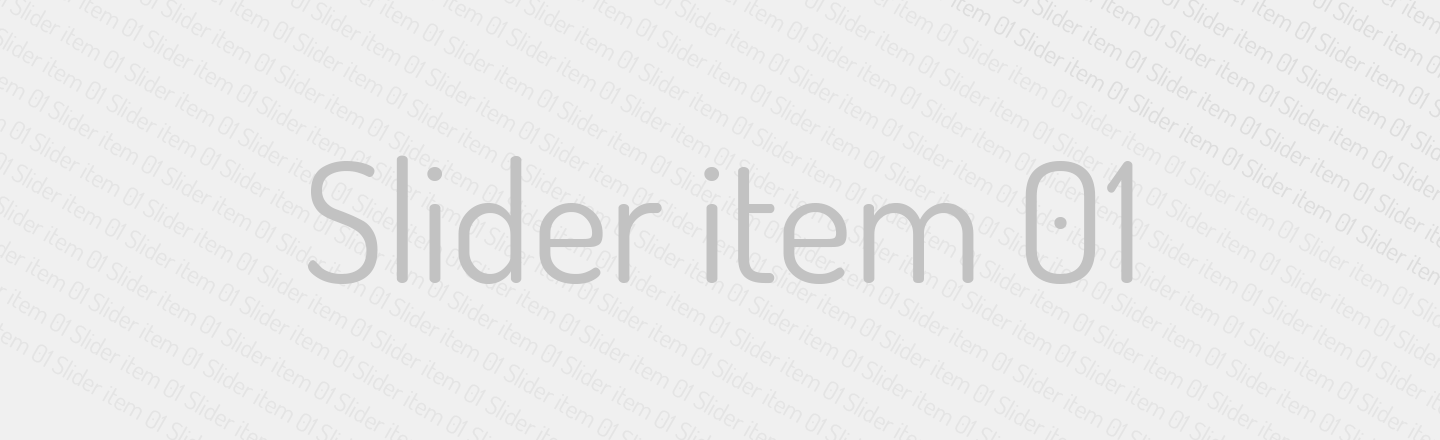
<style>
.page{position:relative;width:1440px;height:440px;background:#f0f0f0}
.page>*{position:absolute;margin:0}
.t1{font:25px "Dosis-Regular";color:#d8d8d8}
.t2{font:166.7px "Dosis-Regular";color:#c2c2c2}
</style>
<div class="page">
<p class="t1" style="left:160px;top:0px;width:116px;height:75px;rotate:30deg;opacity:0.8">01 Slider item</p>
<p class="t1" style="left:310px;top:2px;width:116px;height:76px;rotate:30deg;opacity:0.8">01 Slider item</p>
<p class="t1" style="left:674px;top:0px;width:116px;height:75px;rotate:30deg;opacity:0.8">01 Slider item</p>
<p class="t1" style="left:824px;top:2px;width:116px;height:76px;rotate:30deg;opacity:0.8">01 Slider item</p>
<p class="t1" style="left:1182px;top:0px;width:116px;height:75px;rotate:30deg">01 Slider item</p>
<p class="t1" style="left:142px;top:30px;width:116px;height:77px;rotate:30deg;opacity:0.8">01 Slider item</p>
<p class="t1" style="left:505px;top:28px;width:116px;height:76px;rotate:30deg;opacity:0.8">01 Slider item</p>
<p class="t1" style="left:656px;top:30px;width:116px;height:77px;rotate:30deg;opacity:0.8">01 Slider item</p>
<p class="t1" style="left:1013px;top:28px;width:116px;height:76px;rotate:30deg">01 Slider item</p>
<p class="t1" style="left:1164px;top:30px;width:116px;height:77px;rotate:30deg">01 Slider item</p>
<p class="t1" style="left:292px;top:33px;width:116px;height:76px;rotate:30deg;opacity:0.8">01 Slider item</p>
<p class="t1" style="left:443px;top:36px;width:116px;height:76px;rotate:30deg;opacity:0.8">01 Slider item</p>
<p class="t1" style="left:806px;top:33px;width:116px;height:76px;rotate:30deg;opacity:0.8">01 Slider item</p>
<p class="t1" style="left:957px;top:36px;width:116px;height:76px;rotate:30deg;opacity:0.8">01 Slider item</p>
<p class="t1" style="left:1314px;top:33px;width:116px;height:76px;rotate:30deg">01 Slider item</p>
<p class="t1" style="left:124px;top:63px;width:116px;height:76px;rotate:30deg;opacity:0.8">01 Slider item</p>
<p class="t1" style="left:274px;top:65px;width:116px;height:76px;rotate:30deg;opacity:0.8">01 Slider item</p>
<p class="t1" style="left:638px;top:63px;width:116px;height:76px;rotate:30deg;opacity:0.8">01 Slider item</p>
<p class="t1" style="left:788px;top:65px;width:116px;height:76px;rotate:30deg;opacity:0.8">01 Slider item</p>
<p class="t1" style="left:1146px;top:63px;width:116px;height:76px;rotate:30deg">01 Slider item</p>
<p class="t1" style="left:1296px;top:65px;width:116px;height:76px;rotate:30deg">01 Slider item</p>
<p class="t1" style="left:425px;top:68px;width:116px;height:76px;rotate:30deg;opacity:0.8">01 Slider item</p>
<p class="t1" style="left:939px;top:68px;width:116px;height:76px;rotate:30deg;opacity:0.8">01 Slider item</p>
<p class="t1" style="left:48px;top:101px;width:115px;height:76px;rotate:30deg;opacity:0.8">01 Slider item</p>
<p class="t1" style="left:106px;top:94px;width:116px;height:76px;rotate:30deg;opacity:0.8">01 Slider item</p>
<p class="t1" style="left:407px;top:99px;width:116px;height:76px;rotate:30deg;opacity:0.8">01 Slider item</p>
<p class="t1" style="left:557px;top:101px;width:115px;height:76px;rotate:30deg;opacity:0.8">01 Slider item</p>
<p class="t1" style="left:620px;top:94px;width:116px;height:76px;rotate:30deg;opacity:0.8">01 Slider item</p>
<p class="t1" style="left:770px;top:96px;width:116px;height:76px;rotate:30deg;opacity:0.8">01 Slider item</p>
<p class="t1" style="left:921px;top:99px;width:116px;height:76px;rotate:30deg;opacity:0.8">01 Slider item</p>
<p class="t1" style="left:1128px;top:94px;width:116px;height:76px;rotate:30deg">01 Slider item</p>
<p class="t1" style="left:1278px;top:96px;width:116px;height:76px;rotate:30deg">01 Slider item</p>
<p class="t1" style="left:29px;top:133px;width:116px;height:76px;rotate:30deg;opacity:0.8">01 Slider item</p>
<p class="t1" style="left:751px;top:128px;width:116px;height:76px;rotate:30deg;opacity:0.8">01 Slider item</p>
<p class="t1" style="left:902px;top:131px;width:116px;height:76px;rotate:30deg;opacity:0.8">01 Slider item</p>
<p class="t1" style="left:1259px;top:128px;width:116px;height:76px;rotate:30deg">01 Slider item</p>
<p class="t2" style="left:308px;top:155px;width:825px;height:129px">01 Slider item</p>
<p class="t1" style="left:1241px;top:159px;width:116px;height:76px;rotate:30deg">01 Slider item</p>
<p class="t1" style="left:11px;top:164px;width:116px;height:76px;rotate:30deg;opacity:0.8">01 Slider item</p>
<p class="t1" style="left:161px;top:167px;width:116px;height:76px;rotate:30deg;opacity:0.8">01 Slider item</p>
<p class="t1" style="left:1184px;top:167px;width:116px;height:76px;rotate:30deg;opacity:0.8">01 Slider item</p>
<p class="t1" style="left:142px;top:199px;width:116px;height:76px;rotate:30deg;opacity:0.8">01 Slider item</p>
<p class="t1" style="left:1165px;top:199px;width:116px;height:76px;rotate:30deg;opacity:0.8">01 Slider item</p>
<p class="t1" style="left:124px;top:230px;width:116px;height:76px;rotate:30deg;opacity:0.8">01 Slider item</p>
<p class="t1" style="left:1147px;top:230px;width:116px;height:76px;rotate:30deg;opacity:0.8">01 Slider item</p>
<p class="t1" style="left:1298px;top:233px;width:116px;height:76px;rotate:30deg;opacity:0.8">01 Slider item</p>
<p class="t1" style="left:106px;top:262px;width:116px;height:76px;rotate:30deg;opacity:0.8">01 Slider item</p>
<p class="t1" style="left:1129px;top:262px;width:116px;height:76px;rotate:30deg;opacity:0.8">01 Slider item</p>
<p class="t1" style="left:1280px;top:265px;width:116px;height:76px;rotate:30deg;opacity:0.8">01 Slider item</p>
<p class="t1" style="left:88px;top:293px;width:116px;height:76px;rotate:30deg;opacity:0.8">01 Slider item</p>
<p class="t1" style="left:447px;top:291px;width:116px;height:76px;rotate:30deg;opacity:0.8">01 Slider item</p>
<p class="t1" style="left:597px;top:293px;width:116px;height:76px;rotate:30deg;opacity:0.8">01 Slider item</p>
<p class="t1" style="left:961px;top:291px;width:116px;height:76px;rotate:30deg;opacity:0.8">01 Slider item</p>
<p class="t1" style="left:1111px;top:293px;width:116px;height:76px;rotate:30deg;opacity:0.8">01 Slider item</p>
<p class="t1" style="left:239px;top:296px;width:116px;height:76px;rotate:30deg;opacity:0.8">01 Slider item</p>
<p class="t1" style="left:389px;top:298px;width:116px;height:76px;rotate:30deg;opacity:0.8">01 Slider item</p>
<p class="t1" style="left:748px;top:296px;width:116px;height:76px;rotate:30deg;opacity:0.8">01 Slider item</p>
<p class="t1" style="left:898px;top:298px;width:116px;height:76px;rotate:30deg;opacity:0.8">01 Slider item</p>
<p class="t1" style="left:1262px;top:296px;width:116px;height:76px;rotate:30deg;opacity:0.8">01 Slider item</p>
<p class="t1" style="left:69px;top:325px;width:116px;height:76px;rotate:30deg;opacity:0.8">01 Slider item</p>
<p class="t1" style="left:220px;top:328px;width:116px;height:76px;rotate:30deg;opacity:0.8">01 Slider item</p>
<p class="t1" style="left:578px;top:325px;width:116px;height:76px;rotate:30deg;opacity:0.8">01 Slider item</p>
<p class="t1" style="left:729px;top:328px;width:116px;height:76px;rotate:30deg;opacity:0.8">01 Slider item</p>
<p class="t1" style="left:1092px;top:325px;width:116px;height:76px;rotate:30deg;opacity:0.8">01 Slider item</p>
<p class="t1" style="left:1243px;top:328px;width:116px;height:76px;rotate:30deg;opacity:0.8">01 Slider item</p>
<p class="t1" style="left:370px;top:330px;width:116px;height:76px;rotate:30deg;opacity:0.8">01 Slider item</p>
<p class="t1" style="left:879px;top:330px;width:116px;height:76px;rotate:30deg;opacity:0.8">01 Slider item</p>
<p class="t1" style="left:51px;top:356px;width:116px;height:76px;rotate:30deg;opacity:0.8">01 Slider item</p>
<p class="t1" style="left:202px;top:359px;width:116px;height:76px;rotate:30deg;opacity:0.8">01 Slider item</p>
<p class="t1" style="left:352px;top:361px;width:116px;height:76px;rotate:30deg;opacity:0.8">01 Slider item</p>
<p class="t1" style="left:503px;top:364px;width:116px;height:76px;rotate:30deg;opacity:0.8">01 Slider item</p>
<p class="t1" style="left:560px;top:356px;width:116px;height:76px;rotate:30deg;opacity:0.8">01 Slider item</p>
<p class="t1" style="left:711px;top:359px;width:116px;height:76px;rotate:30deg;opacity:0.8">01 Slider item</p>
<p class="t1" style="left:861px;top:361px;width:116px;height:76px;rotate:30deg;opacity:0.8">01 Slider item</p>
<p class="t1" style="left:1012px;top:364px;width:116px;height:76px;rotate:30deg;opacity:0.8">01 Slider item</p>
<p class="t1" style="left:1074px;top:356px;width:116px;height:76px;rotate:30deg;opacity:0.8">01 Slider item</p>
<p class="t1" style="left:1225px;top:359px;width:116px;height:76px;rotate:30deg;opacity:0.8">01 Slider item</p>
</div>
